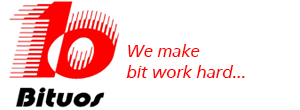
<style>
.page{position:relative;width:300px;height:110px;background:#ffffff}
.page>*{position:absolute;margin:0}
.t1{font:18px "FrontPage-Italic";color:#fc0303}
</style>
<div class="page">
<p class="t1" style="left:126px;top:44px;width:119px;height:34px">We make <br>bit work hard...</p>
</div>
